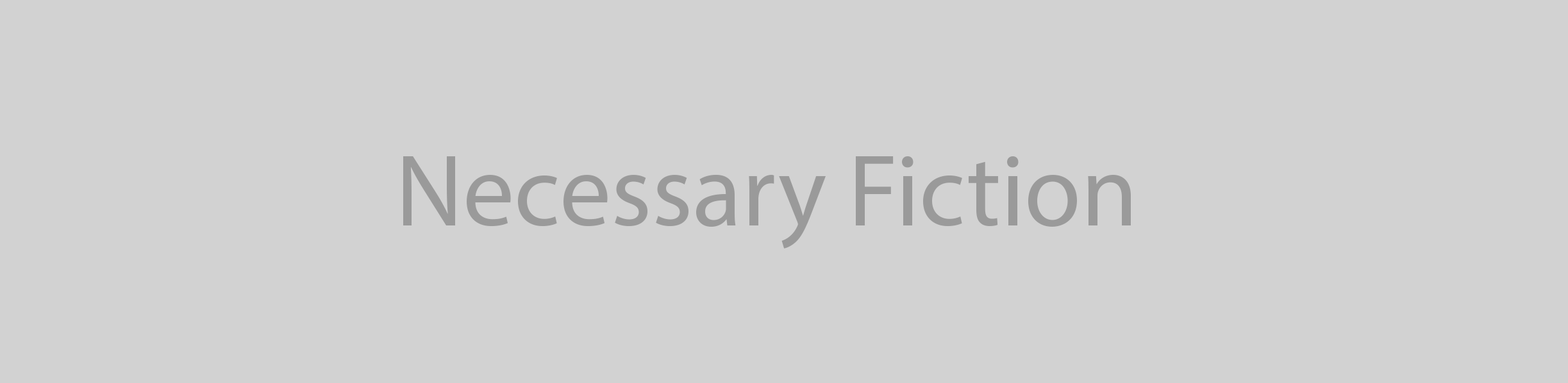
<style>
.page{position:relative;width:1568px;height:383px;background:#d2d2d2}
.page>*{position:absolute;margin:0}
.t1{font:102.6px "MyriadPro-Regular";color:#9a9a9a}
</style>
<div class="page">
<p class="t1" style="left:403px;top:156px;width:728px;height:93px">Necessary Fiction</p>
</div>
